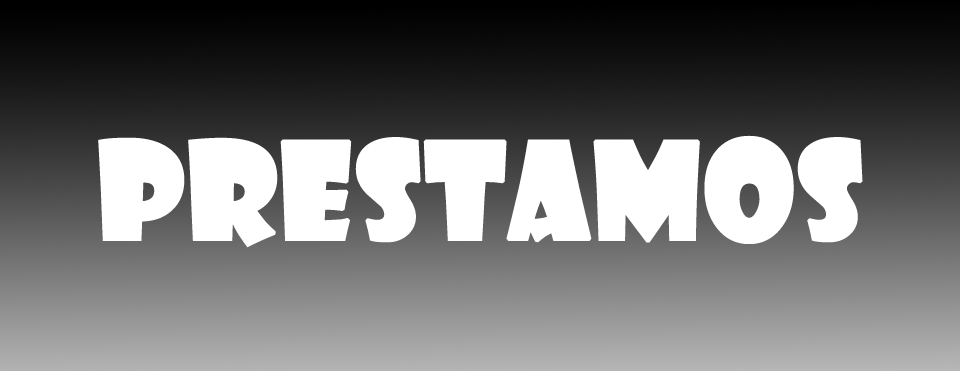
<style>
.page{position:relative;width:960px;height:371px}
.page>*{position:absolute;margin:0}
.t1{font:130px "ShowcardGothic-Reg";color:#ffffff;font-weight:bold}
</style>
<div class="page">
<p class="t1" style="left:98px;top:135px;width:765px;height:113px">prestamos</p>
</div>
